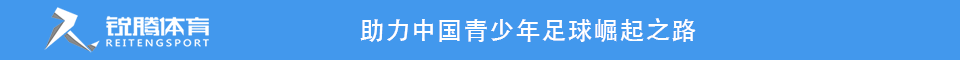
<style>
.page{position:relative;width:960px;height:60px;background:#4298ed}
.page>*{position:absolute;margin:0}
.t1{font:25px "STHeitiSC-Medium";letter-spacing:0.05em;color:#ffffff}
</style>
<div class="page">
<p class="t1" style="left:360px;top:18px;width:336px;height:24px">助力中国青少年足球崛起之路</p>
</div>
